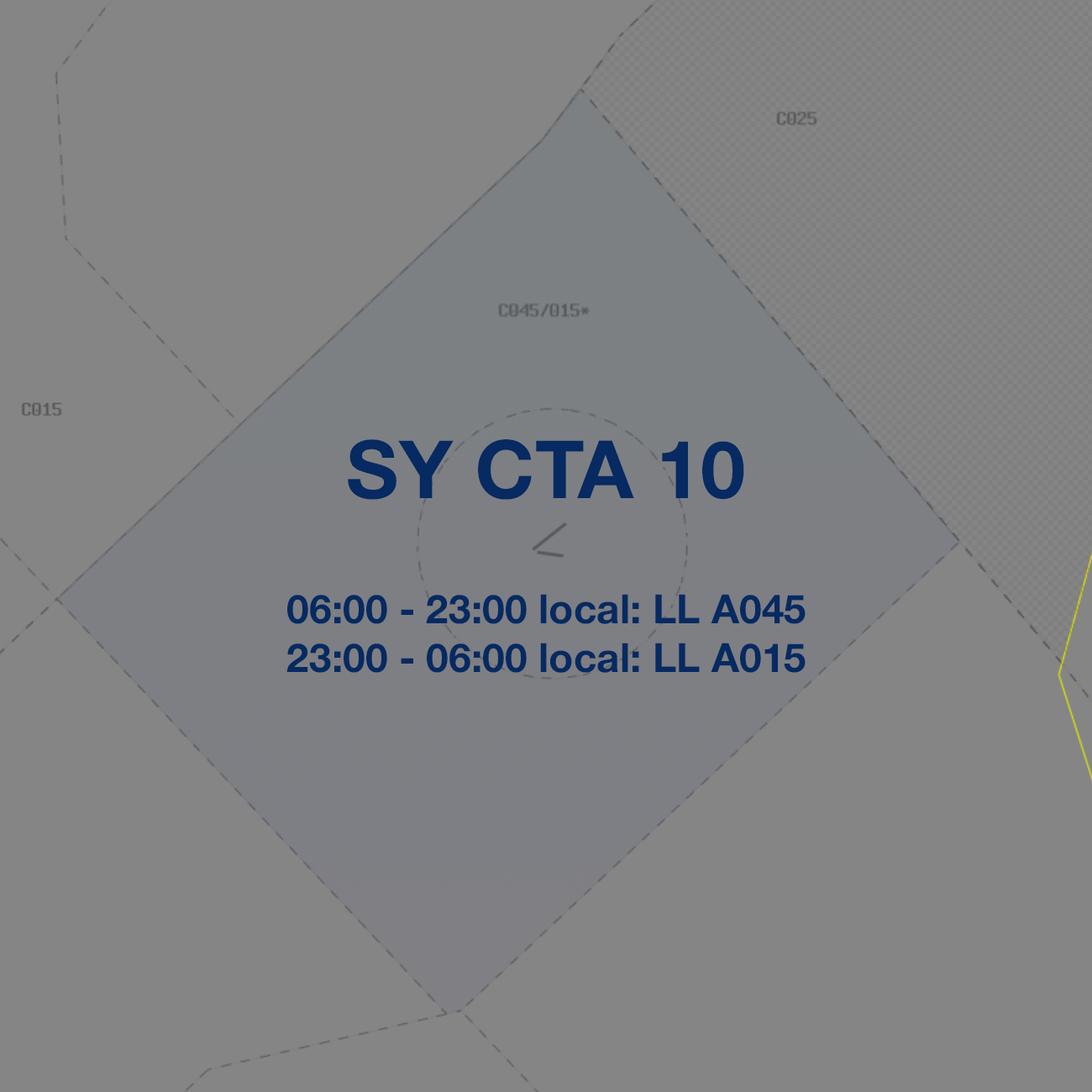
<style>
.page{position:relative;width:1092px;height:1092px;background:#858585}
.page>*{position:absolute;margin:0}
.t1{font:80.6px "HelveticaNeue-Bold";color:#062a61}
.t2{font:40.3px "HelveticaNeue-Bold";color:#062a61}
</style>
<div class="page">
<p class="t1" style="left:348px;top:439px;width:396px;height:61px">SY CTA 10</p>
<p class="t2" style="left:286px;top:594px;width:520px;height:79px">06:00 - 23:00 local: LL A045<br>23:00 - 06:00 local: LL A015</p>
</div>
